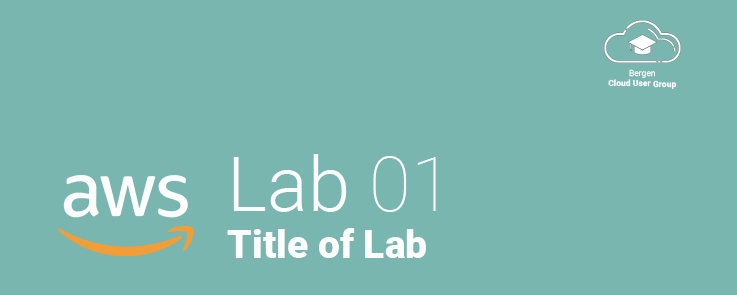
<style>
.page{position:relative;width:737px;height:295px;background:#78b6af}
.page>*{position:absolute;margin:0}
.t1{font:8.6px "Roboto-Bold";color:#ffffff}
.t2{font:8.6px "Roboto-Light";color:#ffffff}
.t3{font:39px "Roboto-Black";color:#ffffff}
.t4{font:76px "Roboto-Light";color:#ffffff}
.t5{font:76px "Roboto-Thin";color:#ffffff}
</style>
<div class="page">
<p class="t1" style="left:608px;top:69px;width:69px;height:20px;text-align:center"><span class="t2">Bergen<br></span>Cloud User Group</p>
<p class="t3" style="left:227px;top:154px;width:209px;height:104px"><span class="t4">Lab </span><span class="t5">01<br></span>Title of Lab</p>
</div>
